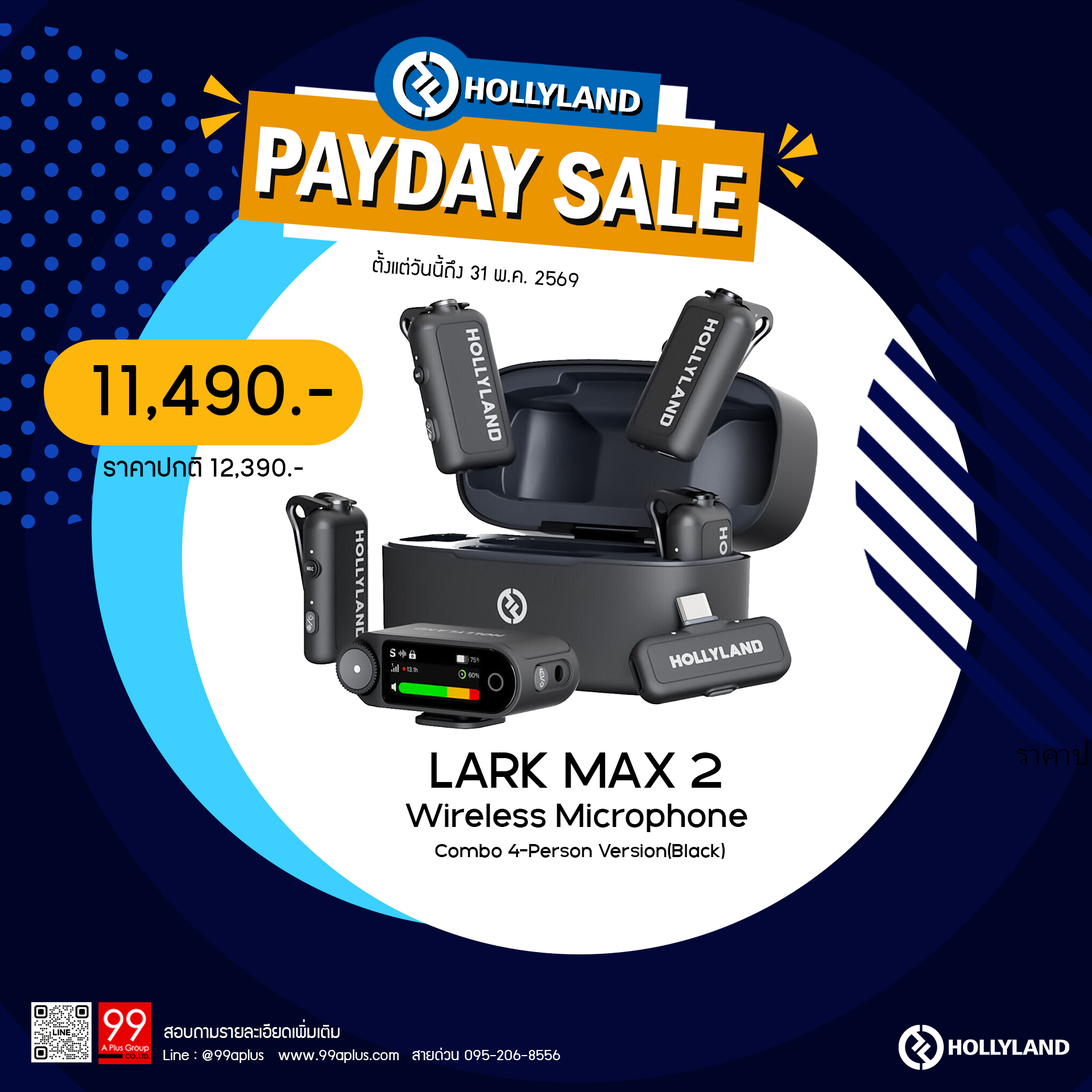
<style>
.page{position:relative;width:1092px;height:1092px;background:#ffffff}
.page>*{position:absolute;margin:0}
.t1{font:97.5px "FranklinGothic-DemiCond";color:#ffffff}
.t2{font:97.5px "FranklinGothic-DemiCond"}
.t3{font:23.2px "supermarket";color:#000000}
.t4{font:83.5px "PK-NakhonPathom-Demo";color:#000000}
.t5{font:30.3px "PK-NakhonPathom-Demo";color:#000000}
.t6{font:54px "GalakPro-Demo";color:#000000}
.t7{font:35.6px "GalakPro-Demo";color:#000000}
.t8{font:20.4px "GalakPro-Demo";color:#000000}
.t9{font:19.8px "supermarket";color:#ffffff}
.t10{font:17.2px "supermarket";color:#ffffff}
</style>
<div class="page">
<p class="t1" style="left:255px;top:126px;width:488px;height:105px;rotate:5deg">PAYDAY SALE</p>
<p class="t2" style="left:259px;top:133px;width:488px;height:105px;rotate:5deg">PAYDAY SALE</p>
<p class="t3" style="left:373px;top:250px;width:205px;height:37px;rotate:4deg">ตั้งแต่วันนี้ถึง 31 พ.ค. 2569</p>
<p class="t4" style="left:93px;top:365px;width:239px;height:56px">11,490.-</p>
<p class="t5" style="left:104px;top:457px;width:199px;height:21px">ราคาปกติ 12,390.-</p>
<p class="t6" style="left:431px;top:752px;width:290px;height:36px">LARK MAX 2</p>
<p class="t7" style="left:406px;top:804px;width:341px;height:28px">Wireless Microphone</p>
<p class="t8" style="left:435px;top:843px;width:290px;height:16px">Combo 4-Person Version(Black)</p>
<p class="t9" style="left:164px;top:1019px;width:176px;height:19px">สอบถามรายละเอียดเพิ่มเติม</p>
<p class="t10" style="left:163px;top:1049px;width:236px;height:14px">Line : @99aplus   www.99aplus.com</p>
<p class="t10" style="left:412px;top:1048px;width:148px;height:12px">สายด่วน 095-206-8556</p>
</div>
